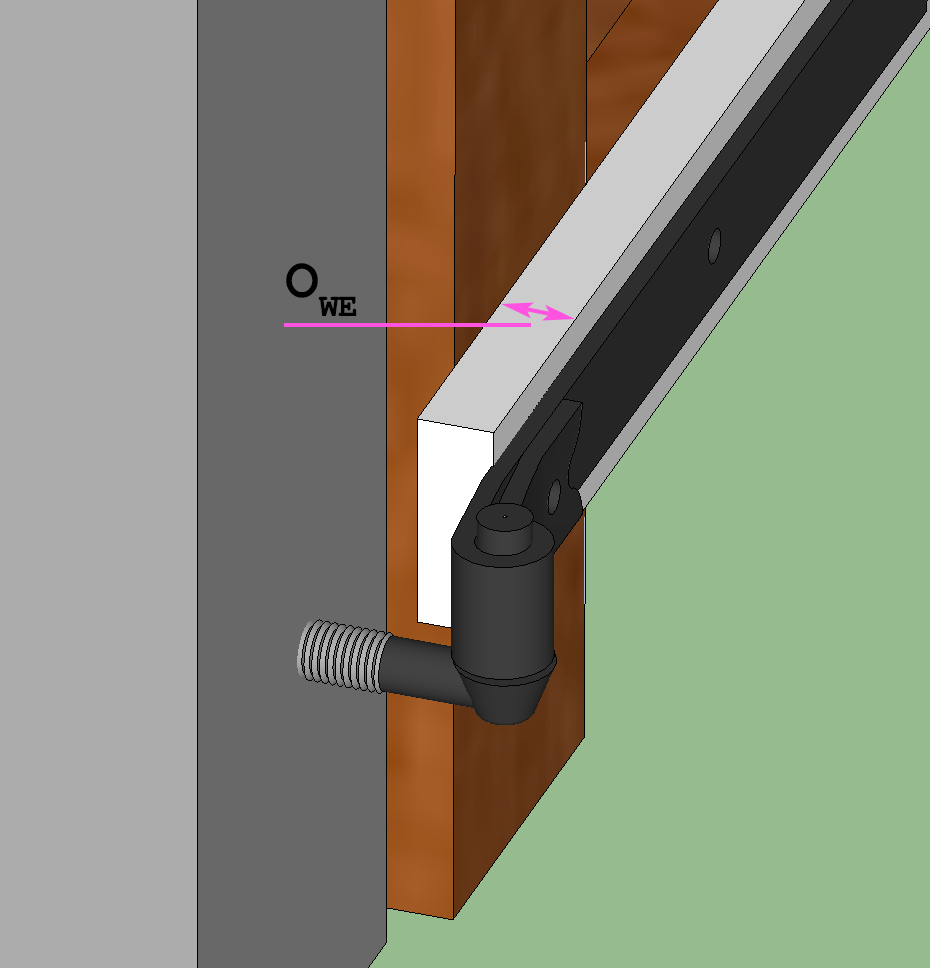
<style>
.page{position:relative;width:930px;height:968px;background:#96bb8f}
.page>*{position:absolute;margin:0}
.t1{font:56.7px "FreeMonoBold";color:#000000}
</style>
<div class="page">
<p class="t1" style="left:286px;top:263px;width:71px;height:53px">OWE</p>
</div>
